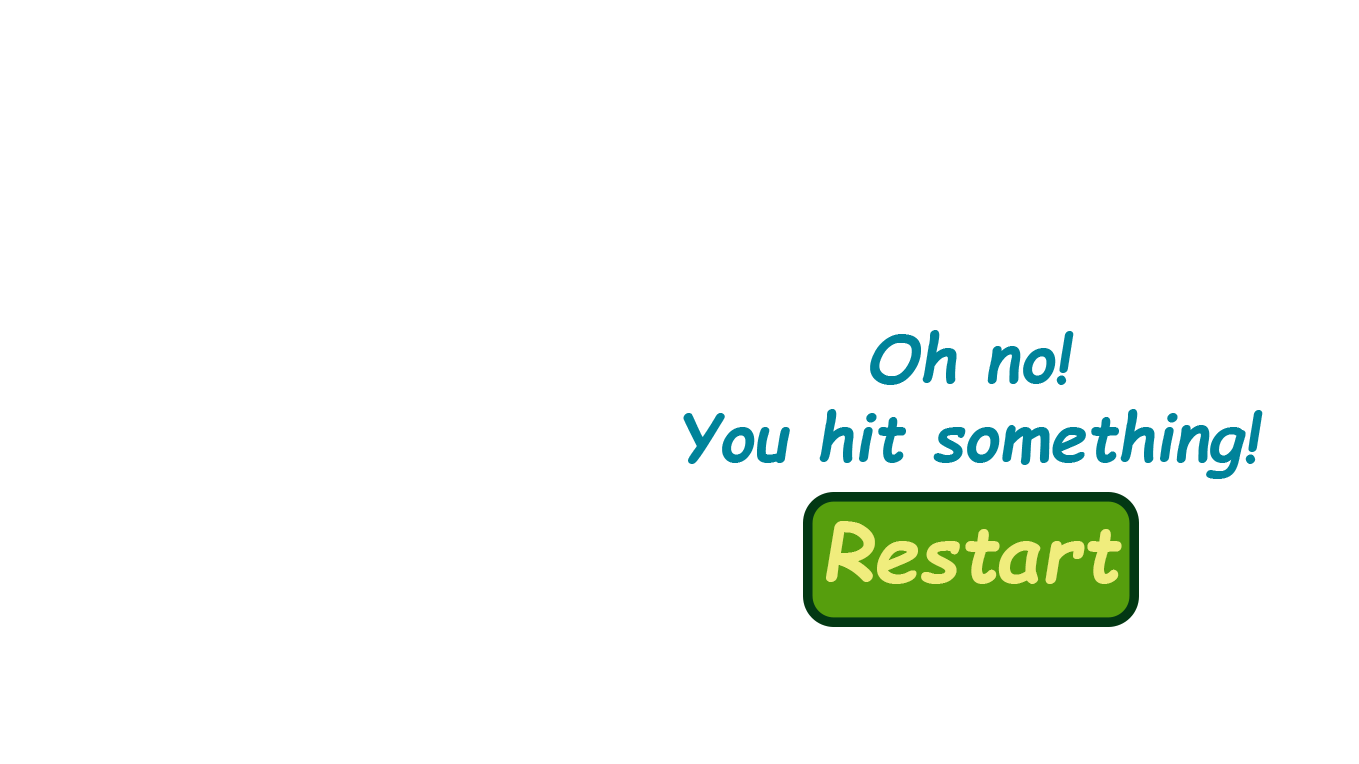
<style>
.page{position:relative;width:1359px;height:764px;background:#ffffff}
.page>*{position:absolute;margin:0}
.t1{font:65.8px "ComicSansMS-BoldItalic";color:#00839a}
.t2{font:81.1px "ComicSansMS-BoldItalic";color:#f0ed7d}
</style>
<div class="page">
<p class="t1" style="left:683px;top:330px;width:580px;height:149px;text-align:center">Oh no!<br>You hit something!</p>
<p class="t2" style="left:826px;top:521px;width:296px;height:63px">Restart</p>
</div>
